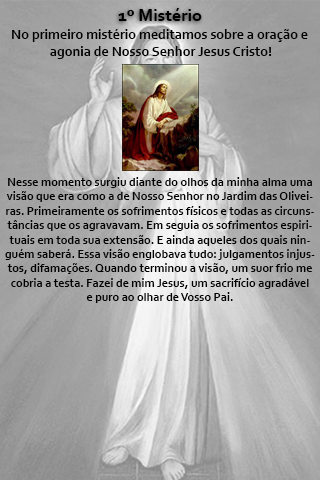
<style>
.page{position:relative;width:320px;height:480px}
.page>*{position:absolute;margin:0}
.t1{font:18px "Corbel-Bold";color:#000000}
.t2{font:14px "Corbel-Bold";color:#000000}
.t3{font:12px "Corbel-Bold";color:#000000}
</style>
<div class="page">
<p class="t1" style="left:118px;top:8px;width:84px;height:13px">1º Mistério</p>
<p class="t2" style="left:12px;top:29px;width:296px;height:30px;text-align:center">No primeiro mistério meditamos sobre a oração e <br>agonia de Nosso Senhor Jesus Cristo!</p>
<p class="t3" style="left:5px;top:177px;width:310px;height:126px;text-align:center">Nesse momento surgiu diante do olhos da minha alma uma<br>visão que era como a de Nosso Senhor no Jardim das Olivei-<br>ras. Primeiramente os sofrimentos físicos e todas as circuns-<br>tâncias que os agravavam. Em seguia os sofrimentos espiri-<br>tuais em toda sua extensão. E ainda aqueles dos quais nin-<br>guém saberá. Essa visão englobava tudo: julgamentos injus-<br>tos, difamações. Quando terminou a visão, um suor frio me<br>cobria a testa. Fazei de mim Jesus, um sacrifício agradável<br>e puro ao olhar de Vosso Pai.</p>
</div>
